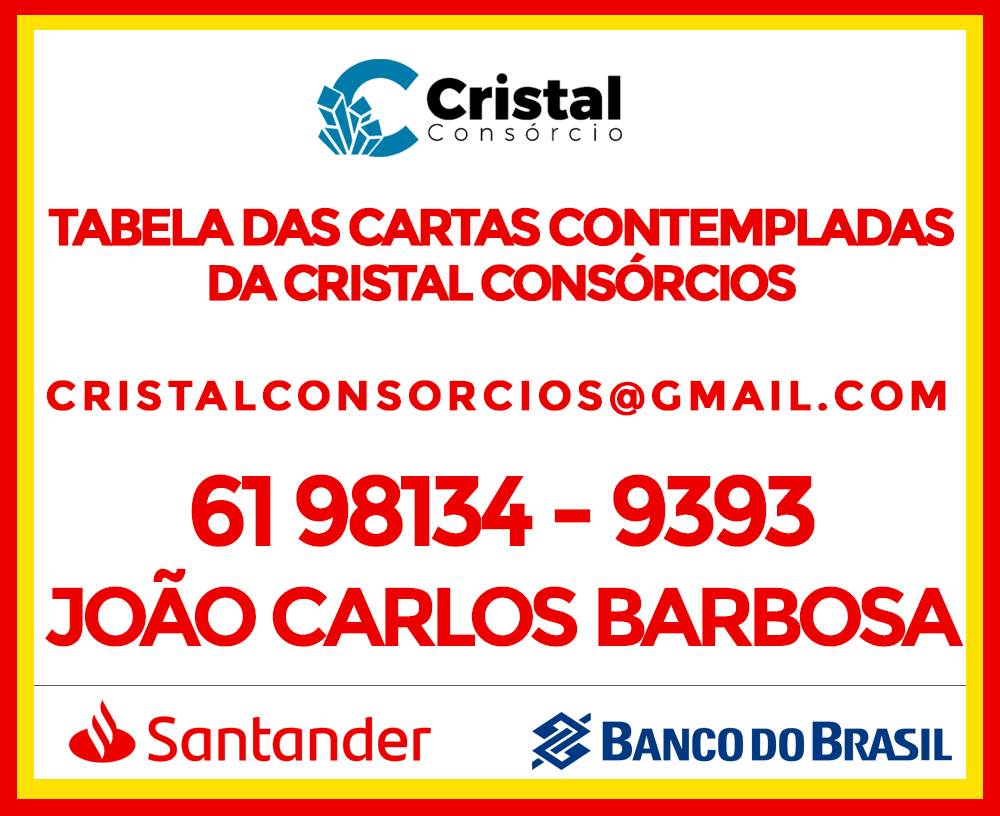
<style>
.page{position:relative;width:1000px;height:816px;background:#ffffff}
.page>*{position:absolute;margin:0}
.t1{font:52.1px/27.6px "Montserrat-Bold";letter-spacing:-0.1em;color:#ec0000;text-transform:uppercase;font-weight:bold}
.t2{font:50px/27.6px "Montserrat-Bold";letter-spacing:-0.1em;color:#ec0000;text-transform:uppercase;font-weight:bold}
.t3{font:41.7px "Montserrat-Bold";letter-spacing:0.1em;color:#ec0000;text-transform:uppercase;font-weight:bold}
.t4{font:83.3px "Montserrat-Bold";letter-spacing:-0.075em;color:#ec0000;text-transform:uppercase}
.t5{font:100px "Montserrat-Bold";letter-spacing:-0.075em;color:#ec0000;text-transform:uppercase}
</style>
<div class="page">
<p class="t1" style="left:48px;top:207px;width:906px;height:95px;text-align:center">TABELA DAS CARTAS CONTEMPLADAS<br><span class="t2"><br>Da Cristal COnsórcios</span></p>
<p class="t3" style="left:46px;top:380px;width:900px;height:36px">Cristalconsorcios@gmail.com</p>
<p class="t4" style="left:45px;top:474px;width:919px;height:173px;text-align:center"><span class="t5">61 98134 - 9393<br></span>JoÃo carlos barbosa</p>
</div>
